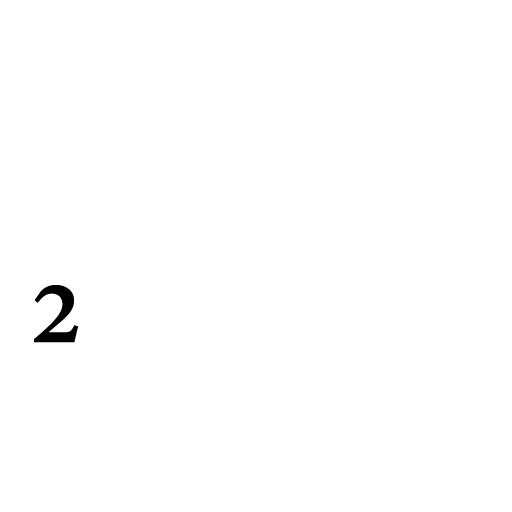
<style>
.page{position:relative;width:512px;height:512px;background:#ffffff}
.page>*{position:absolute;margin:0}
.t1{font:112px "AdobeGurmukhi-Bold";color:#000000}
</style>
<div class="page">
<p class="t1" style="left:34px;top:285px;width:44px;height:58px">2</p>
</div>
